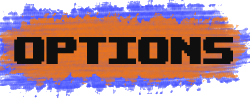
<style>
.page{position:relative;width:250px;height:100px;background:#ffffff}
.page>*{position:absolute;margin:0}
.t1{font:54px "UpheavalTT-BRK-";color:#0f0f0f}
</style>
<div class="page">
<p class="t1" style="left:14px;top:37px;width:219px;height:27px">options</p>
</div>
